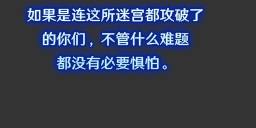
<style>
.page{position:relative;width:256px;height:128px;background:#333333}
.page>*{position:absolute;margin:0}
.t1{font:14.7px/24px "HYWenHei-FEW";letter-spacing:0.005em;color:#d0f7ff}
</style>
<div class="page">
<p class="t1" style="left:27px;top:8px;width:176px;height:62px;text-align:center">如果是连这所迷宫都攻破了<br>的你们，不管什么难题<br>都没有必要惧怕。</p>
</div>
